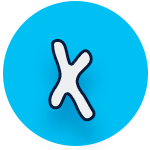
<style>
.page{position:relative;width:150px;height:150px;background:#00bff3}
.page>*{position:absolute;margin:0}
.t1{font:143.4px "GoodDogPlain";letter-spacing:0.2em;font-weight:bold;scale:0.66 1}
</style>
<div class="page">
<p class="t1" style="left:48px;top:39px;width:48px;height:83px">x</p>
</div>
